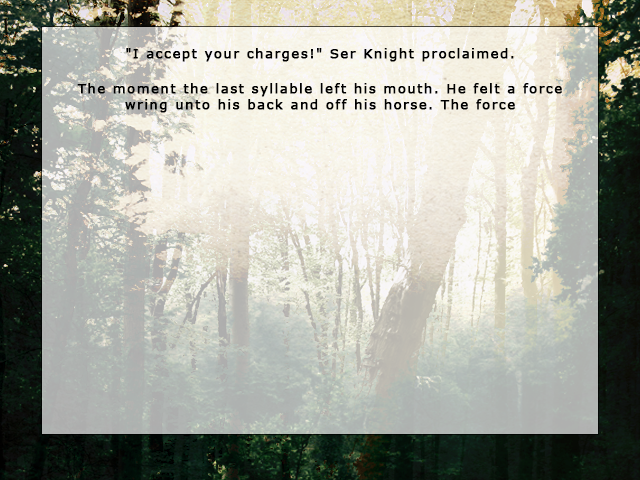
<style>
.page{position:relative;width:640px;height:480px}
.page>*{position:absolute;margin:0}
.t1{font:13px "Verdana";letter-spacing:0.1em;color:#000000;font-weight:bold}
</style>
<div class="page">
<p class="t1" style="left:77px;top:48px;width:485px;height:65px;text-align:center">"I accept your charges!" Ser Knight proclaimed.<br><br>The moment the last syllable left his mouth. He felt a force wring unto his back and off his horse. The force</p>
</div>
